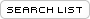
<style>
.page{position:relative;width:90px;height:19px;background:#ffffff}
.page>*{position:absolute;margin:0}
.t1{font:10px "Kroeger0553";color:#000000}
</style>
<div class="page">
<p class="t1" style="left:7px;top:7px;width:75px;height:6px">search list</p>
</div>
